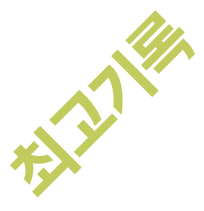
<style>
.page{position:relative;width:204px;height:211px;background:#ffffff}
.page>*{position:absolute;margin:0}
.t1{font:70px "BMHANNA11yrsold";letter-spacing:-0.04em;color:#c2cc5e}
</style>
<div class="page">
<p class="t1" style="left:9px;top:10px;width:186px;height:188px;rotate:-45deg">최고기록</p>
</div>
